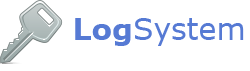
<style>
.page{position:relative;width:250px;height:71px;background:#ffffff}
.page>*{position:absolute;margin:0}
.t1{font:30px "Verdana";color:#567ad4}
.t2{font:30px "Verdana-Bold";color:#567ad4}
</style>
<div class="page">
<p class="t1" style="left:75px;top:18px;width:169px;height:28px"><span class="t2">Log</span>System</p>
</div>
